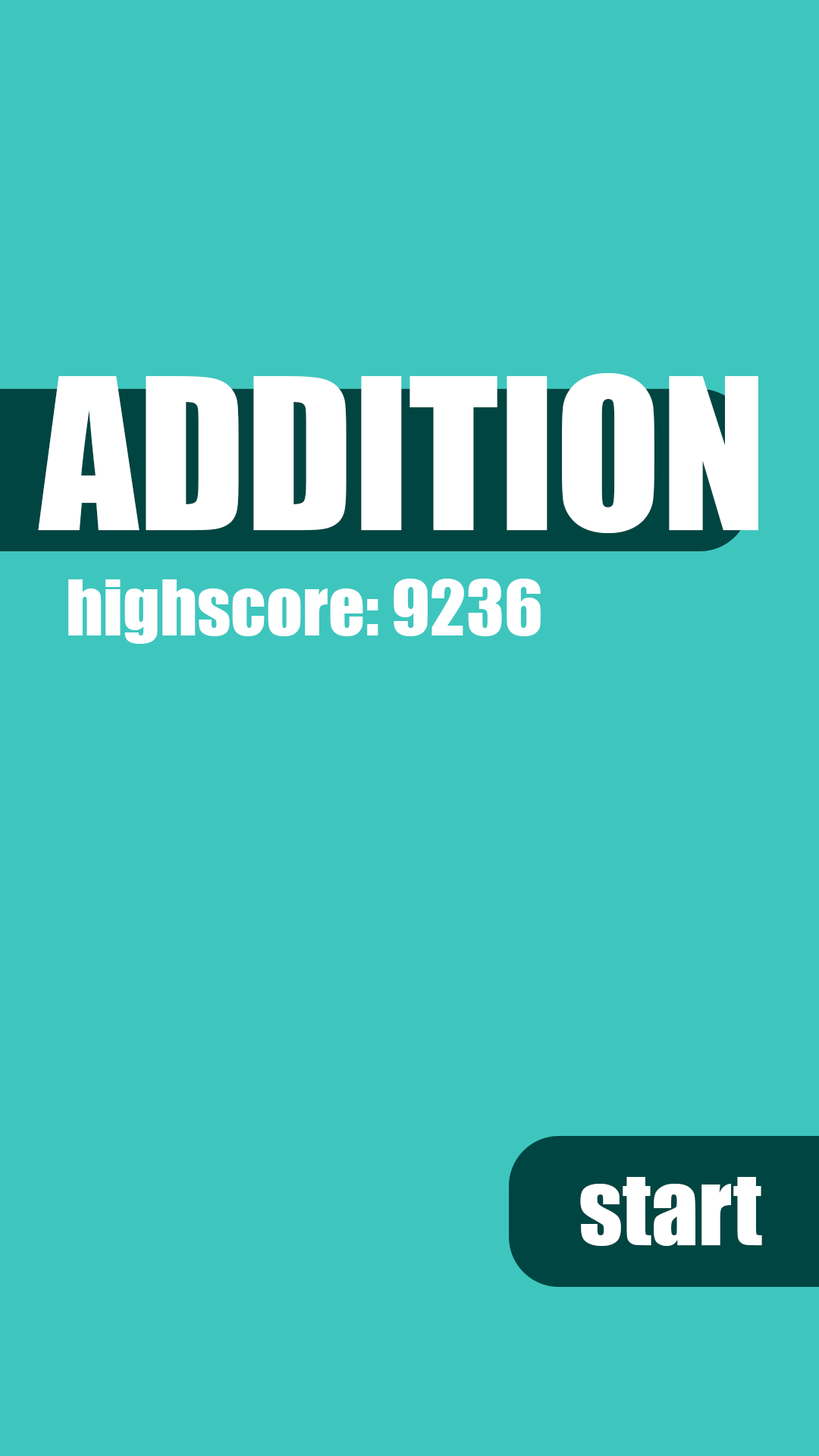
<style>
.page{position:relative;width:819px;height:1456px;background:#3ec6be}
.page>*{position:absolute;margin:0}
.t1{font:194.9px "Impact";color:#ffffff;text-transform:uppercase}
.t2{font:71.4px "Impact";color:#ffffff}
.t3{font:93.5px "Impact";color:#ffffff}
</style>
<div class="page">
<p class="t1" style="left:38px;top:373px;width:720px;height:160px">Addition</p>
<p class="t2" style="left:68px;top:579px;width:473px;height:65px">highscore: 9236</p>
<p class="t3" style="left:580px;top:1177px;width:182px;height:69px">start</p>
</div>
